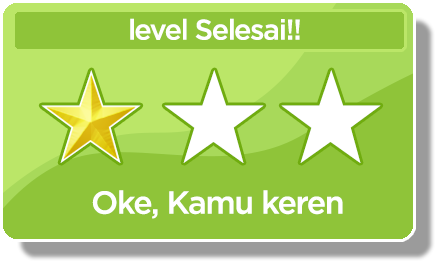
<style>
.page{position:relative;width:435px;height:261px;background:#8fc439}
.page>*{position:absolute;margin:0}
.t1{font:28.4px "iCielGotham-Medium";letter-spacing:-0.04em;color:#ffffff}
.t2{font:31.8px "iCielGotham-Medium";letter-spacing:-0.04em;color:#ffffff}
</style>
<div class="page">
<p class="t1" style="left:130px;top:18px;width:170px;height:22px">level Selesai!!</p>
<p class="t2" style="left:92px;top:190px;width:251px;height:29px">Oke, Kamu keren</p>
</div>
